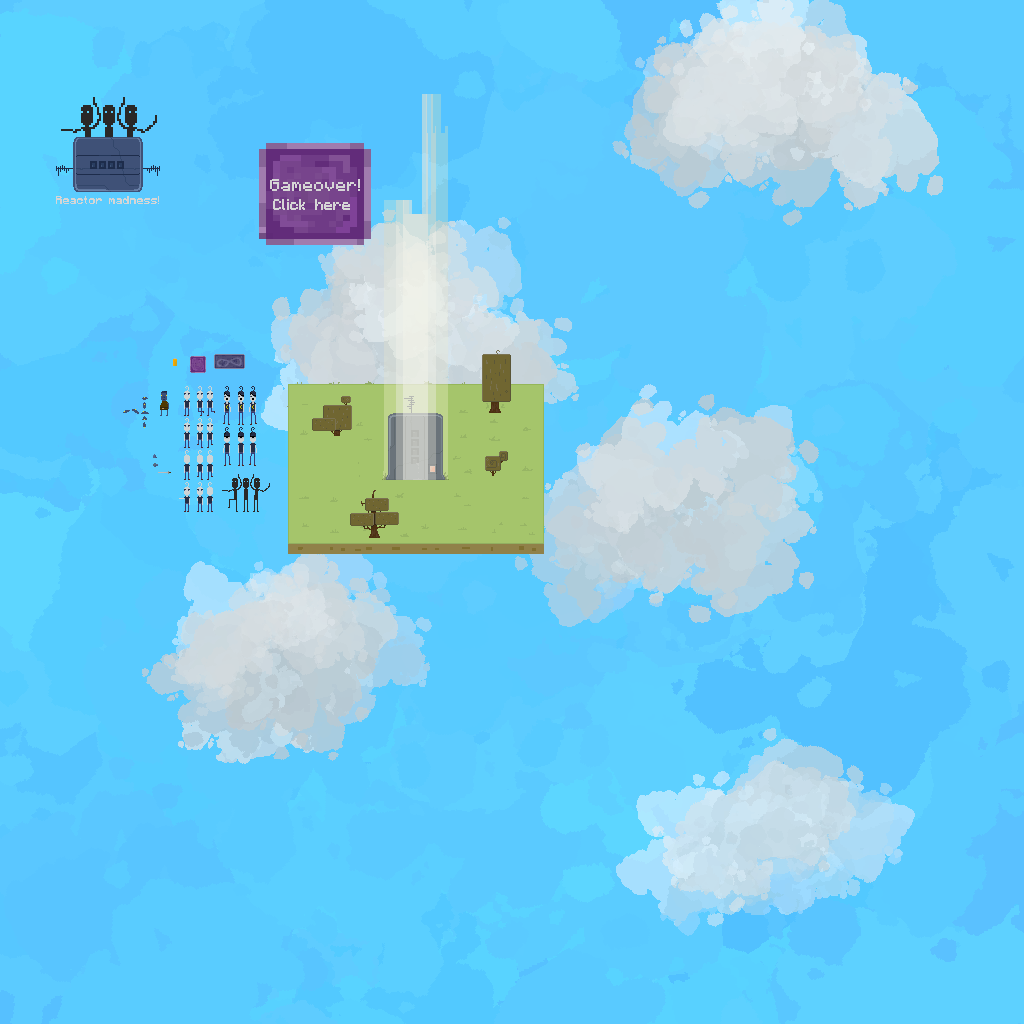
<style>
.page{position:relative;width:1024px;height:1024px}
.page>*{position:absolute;margin:0}
.t1{font:14px "Minecraftia";color:#d7d5d5}
.t2{font:9px "Minecraftia";color:#d7d5d5}
.t3{font:12px "Minecraftia";color:#d7d5d5}
</style>
<div class="page">
<p class="t1" style="left:270px;top:179px;width:90px;height:12px">Gameover!</p>
<p class="t2" style="left:56px;top:196px;width:103px;height:8px">Reactor madness!</p>
<p class="t3" style="left:273px;top:199px;width:77px;height:11px">Click here</p>
</div>
